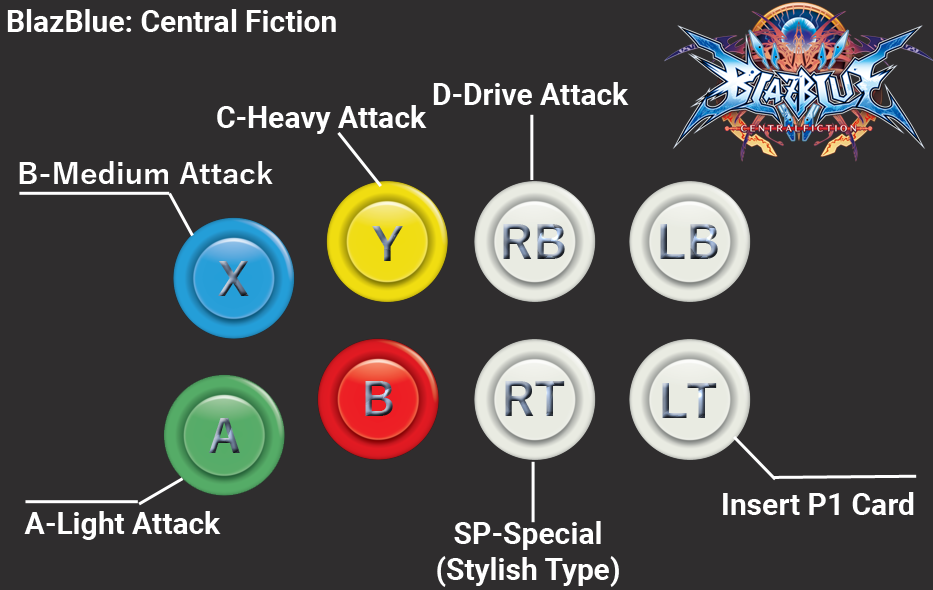
<style>
.page{position:relative;width:933px;height:590px;background:#2f2d2e}
.page>*{position:absolute;margin:0}
.t1{font:30px "Roboto-Bold";color:#ffffff}
.t2{font:30px "YuGothic-Bold";color:#ffffff}
.t3{font:30px/36px "Roboto-Bold";color:#ffffff}
</style>
<div class="page">
<p class="t1" style="left:7px;top:9px;width:329px;height:23px">BlazBlue: Central Fiction</p>
<p class="t1" style="left:433px;top:82px;width:196px;height:23px">D-Drive Attack</p>
<p class="t1" style="left:217px;top:105px;width:210px;height:29px">C-Heavy Attack</p>
<p class="t2" style="left:19px;top:161px;width:254px;height:23px">B-Medium Attack</p>
<p class="t1" style="left:723px;top:492px;width:191px;height:23px">Insert P1 Card</p>
<p class="t1" style="left:24px;top:511px;width:197px;height:29px">A-Light Attack</p>
<p class="t3" style="left:437px;top:521px;width:182px;height:66px;text-align:center">SP-Special<br>(Stylish Type)</p>
</div>
